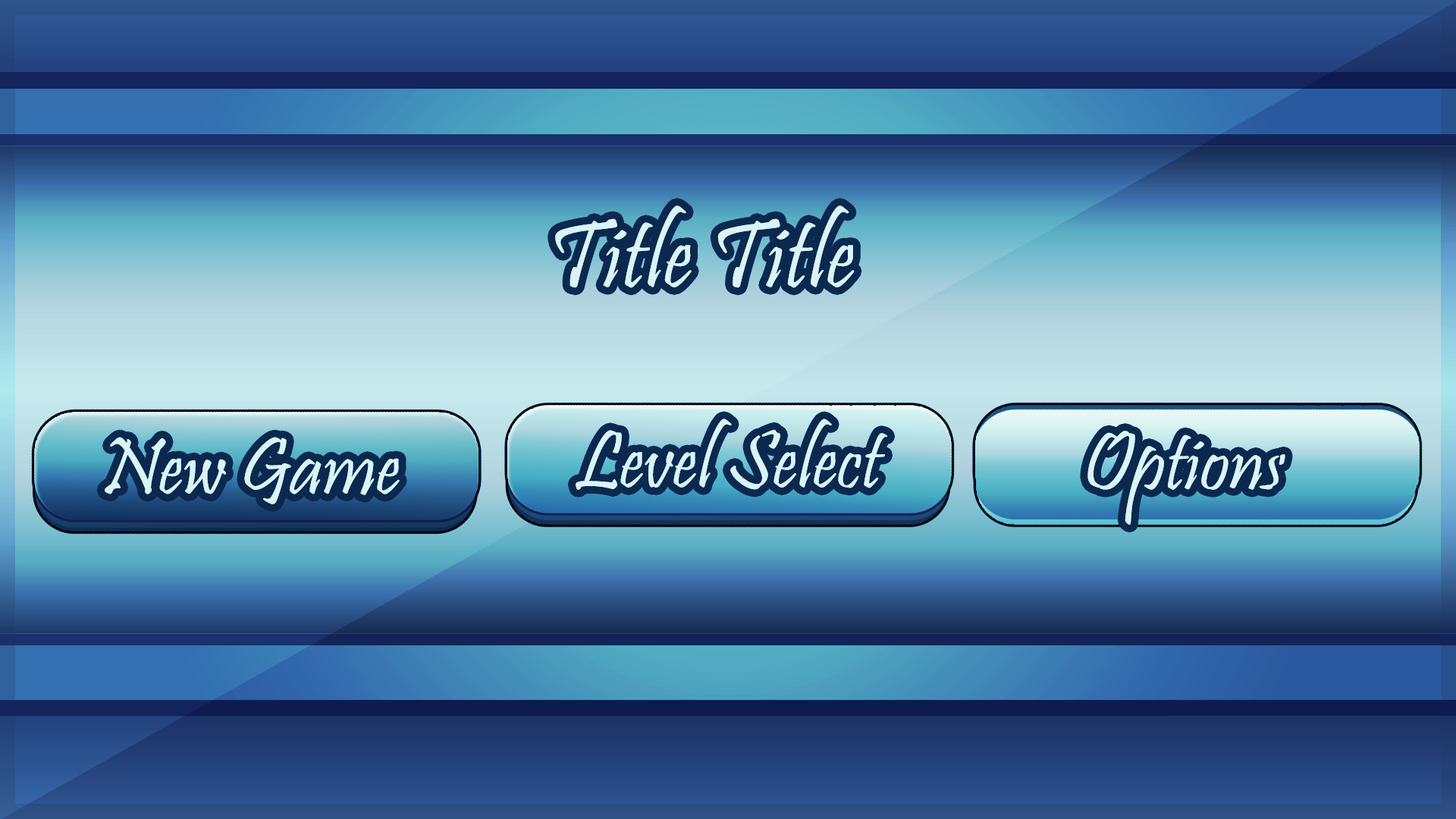
<style>
.page{position:relative;width:1456px;height:819px}
.page>*{position:absolute;margin:0}
.t1{font:98.4px "Pristina-Regular";color:#dcf3f5}
.t2{font:82.7px "Pristina-Regular";color:#dcf3f5}
</style>
<div class="page">
<p class="t1" style="left:555px;top:206px;width:300px;height:82px">Title Title</p>
<p class="t2" style="left:576px;top:419px;width:312px;height:71px">Level Select</p>
<p class="t2" style="left:105px;top:437px;width:295px;height:67px">New Game</p>
<p class="t2" style="left:1087px;top:431px;width:198px;height:94px">Options</p>
</div>
